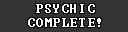
<style>
.page{position:relative;width:128px;height:32px;background:#333333}
.page>*{position:absolute;margin:0}
.t1{font:12px/14px "Terminal";letter-spacing:0.1em;color:#ffffff}
</style>
<div class="page">
<p class="t1" style="left:28px;top:4px;width:73px;height:23px;text-align:center">PSYCHIC<br>COMPLETE!</p>
</div>
